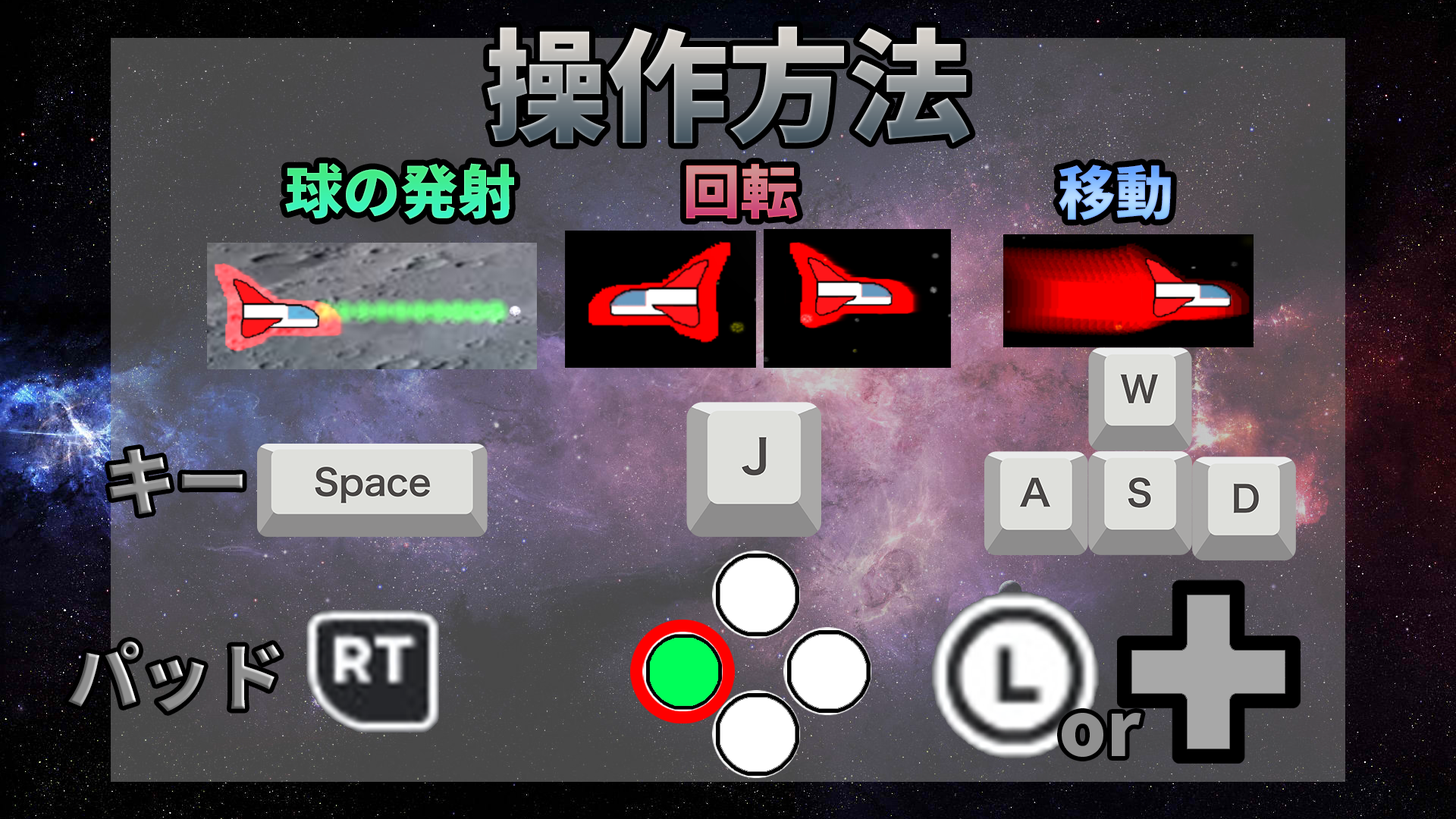
<style>
.page{position:relative;width:1456px;height:819px}
.page>*{position:absolute;margin:0}
.t1{font:121.3px "SourceHanSans-Heavy"}
.t2{font:57.6px "SourceHanSans-Heavy"}
.t3{font:72.8px "SourceHanSans-Heavy";color:#909090}
.t4{font:72.8px "SourceHanSans-Heavy"}
.t5{font:74.6px "SourceHanSans-Heavy";color:#909090}
</style>
<div class="page">
<p class="t1" style="left:487px;top:27px;width:483px;height:118px">操作方法</p>
<p class="t2" style="left:285px;top:163px;width:229px;height:56px">球の発射</p>
<p class="t2" style="left:686px;top:164px;width:111px;height:55px">回転</p>
<p class="t2" style="left:1059px;top:165px;width:112px;height:55px">移動</p>
<p class="t3" style="left:109px;top:449px;width:134px;height:65px">キー</p>
<p class="t4" style="left:68px;top:642px;width:212px;height:69px">パッド</p>
<p class="t5" style="left:1062px;top:713px;width:79px;height:44px">or</p>
</div>
